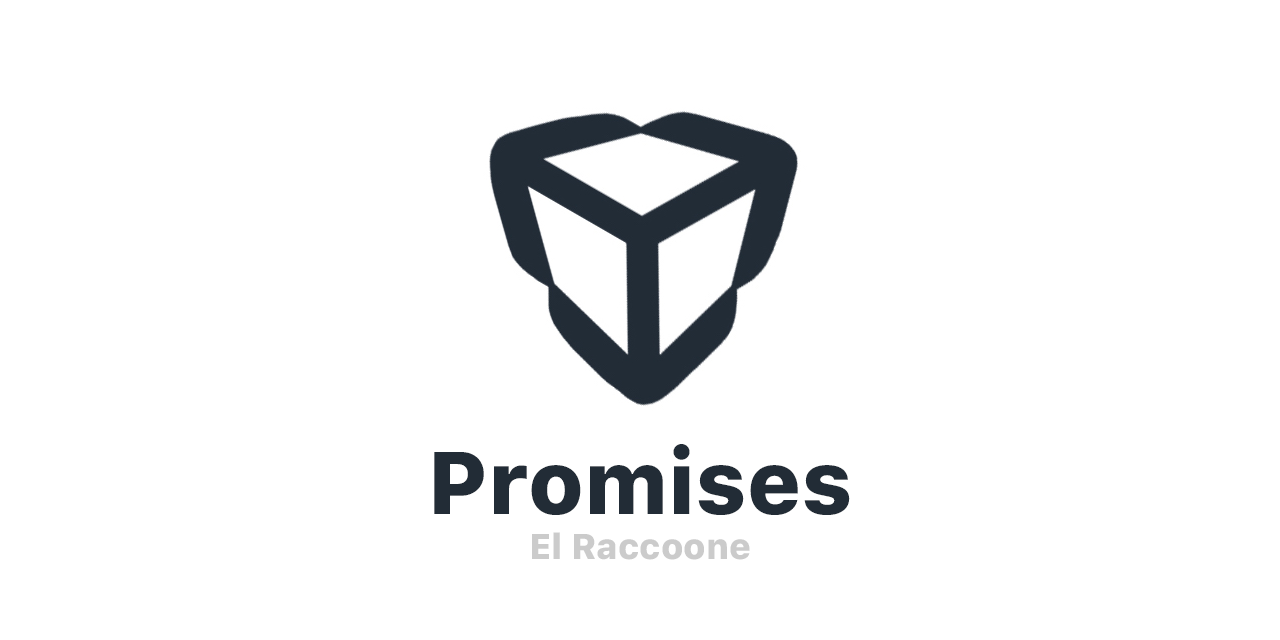
<style>
.page{position:relative;width:1280px;height:640px;background:#ffffff}
.page>*{position:absolute;margin:0}
.t1{font:88px "SFProText-Heavy";color:#222c36}
</style>
<div class="page">
<p class="t1" style="left:434px;top:444px;width:416px;height:71px">Promises</p>
</div>
